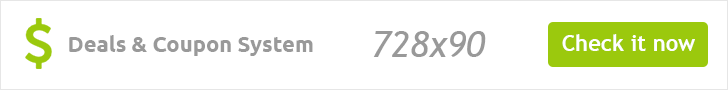
<style>
.page{position:relative;width:728px;height:90px;background:#ffffff}
.page>*{position:absolute;margin:0}
.t1{font:22px "Ubuntu-Bold";color:#999999}
.t2{font:36px "TrebuchetMS-Italic";color:#999999}
.t3{font:22px "TrebuchetMS-Bold";color:#ffffff}
</style>
<div class="page">
<p class="t1" style="left:69px;top:35px;width:244px;height:21px">Deals &amp; Coupon System</p>
<p class="t2" style="left:373px;top:31px;width:113px;height:26px">728x90</p>
<p class="t3" style="left:562px;top:34px;width:133px;height:17px">Check it now</p>
</div>
